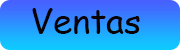
<style>
.page{position:relative;width:180px;height:50px}
.page>*{position:absolute;margin:0}
.t1{font:34.7px "ComicSansMS";color:#0a0202}
</style>
<div class="page">
<p class="t1" style="left:32px;top:8px;width:108px;height:26px">Ventas</p>
</div>
